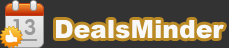
<style>
.page{position:relative;width:229px;height:48px;background:#333333}
.page>*{position:absolute;margin:0}
.t1{font:25px "Arial-Black";color:#f8f8f8}
</style>
<div class="page">
<p class="t1" style="left:56px;top:20px;width:168px;height:19px">DealsMinder</p>
</div>
